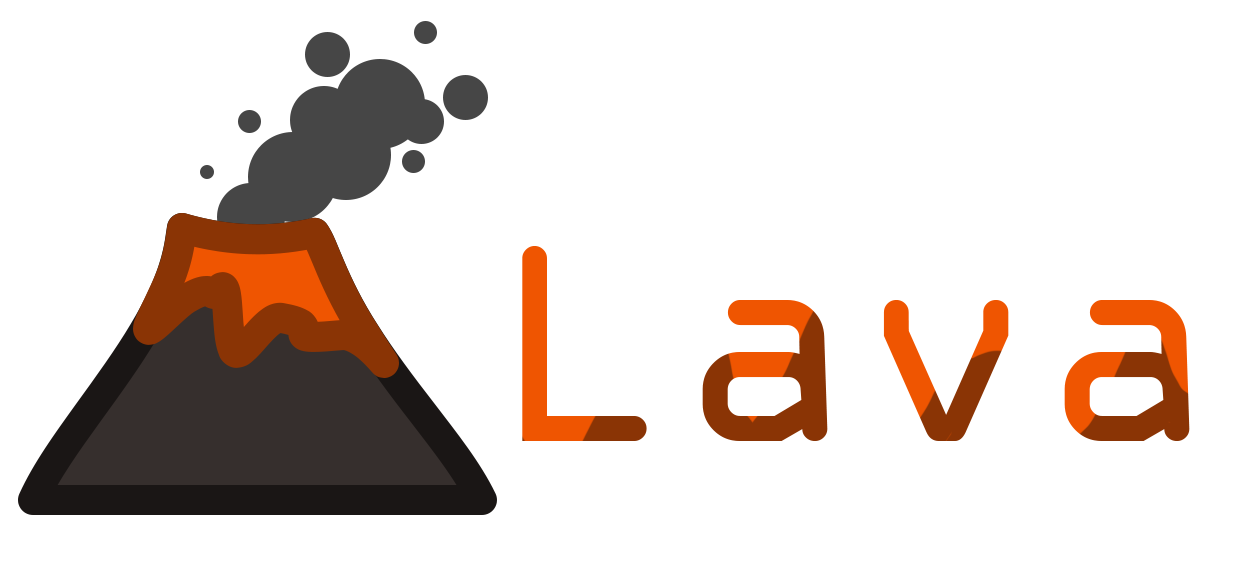
<style>
.page{position:relative;width:1248px;height:564px;background:#ffffff}
.page>*{position:absolute;margin:0}
.t1{font:300px "OCRAExtended"}
</style>
<div class="page">
<p class="t1" style="left:522px;top:246px;width:668px;height:195px">Lava</p>
</div>
